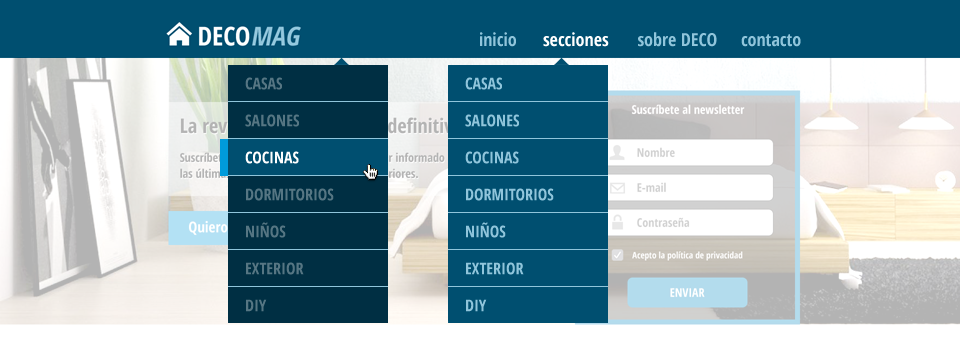
<style>
.page{position:relative;width:960px;height:339px;background:#004f70}
.page>*{position:absolute;margin:0}
.t1{font:18px "OpenSans-CondensedBold";color:#90c5db}
.t2{font:18px "OpenSans-CondensedBold";color:#ffffff}
.t3{font:16px "OpenSans-CondensedBold";color:#567683;text-transform:uppercase}
.t4{font:16px "OpenSans-CondensedBold";color:#90c5db;text-transform:uppercase}
.t5{font:16px "OpenSans-CondensedBold";color:#ffffff;text-transform:uppercase}
</style>
<div class="page">
<p class="t1" style="left:480px;top:32px;width:36px;height:15px">inicio</p>
<p class="t2" style="left:543px;top:32px;width:66px;height:15px">secciones</p>
<p class="t1" style="left:638px;top:32px;width:79px;height:15px">sobre DECO</p>
<p class="t1" style="left:741px;top:34px;width:60px;height:13px">contacto</p>
<p class="t3" style="left:245px;top:77px;width:37px;height:13px">Casas</p>
<p class="t4" style="left:465px;top:77px;width:37px;height:13px">Casas</p>
<p class="t3" style="left:245px;top:114px;width:54px;height:13px">Salones</p>
<p class="t4" style="left:465px;top:114px;width:54px;height:13px">Salones</p>
<p class="t5" style="left:245px;top:151px;width:54px;height:13px">Cocinas</p>
<p class="t4" style="left:465px;top:151px;width:54px;height:13px">Cocinas</p>
<p class="t3" style="left:246px;top:188px;width:88px;height:13px">Dormitorios</p>
<p class="t4" style="left:466px;top:188px;width:88px;height:13px">Dormitorios</p>
<p class="t3" style="left:246px;top:222px;width:40px;height:16px">Niños</p>
<p class="t4" style="left:466px;top:222px;width:40px;height:16px">Niños</p>
<p class="t3" style="left:246px;top:262px;width:58px;height:13px">Exterior</p>
<p class="t4" style="left:466px;top:262px;width:58px;height:13px">Exterior</p>
<p class="t3" style="left:246px;top:299px;width:21px;height:13px">DIY</p>
<p class="t4" style="left:466px;top:299px;width:21px;height:13px">DIY</p>
</div>
